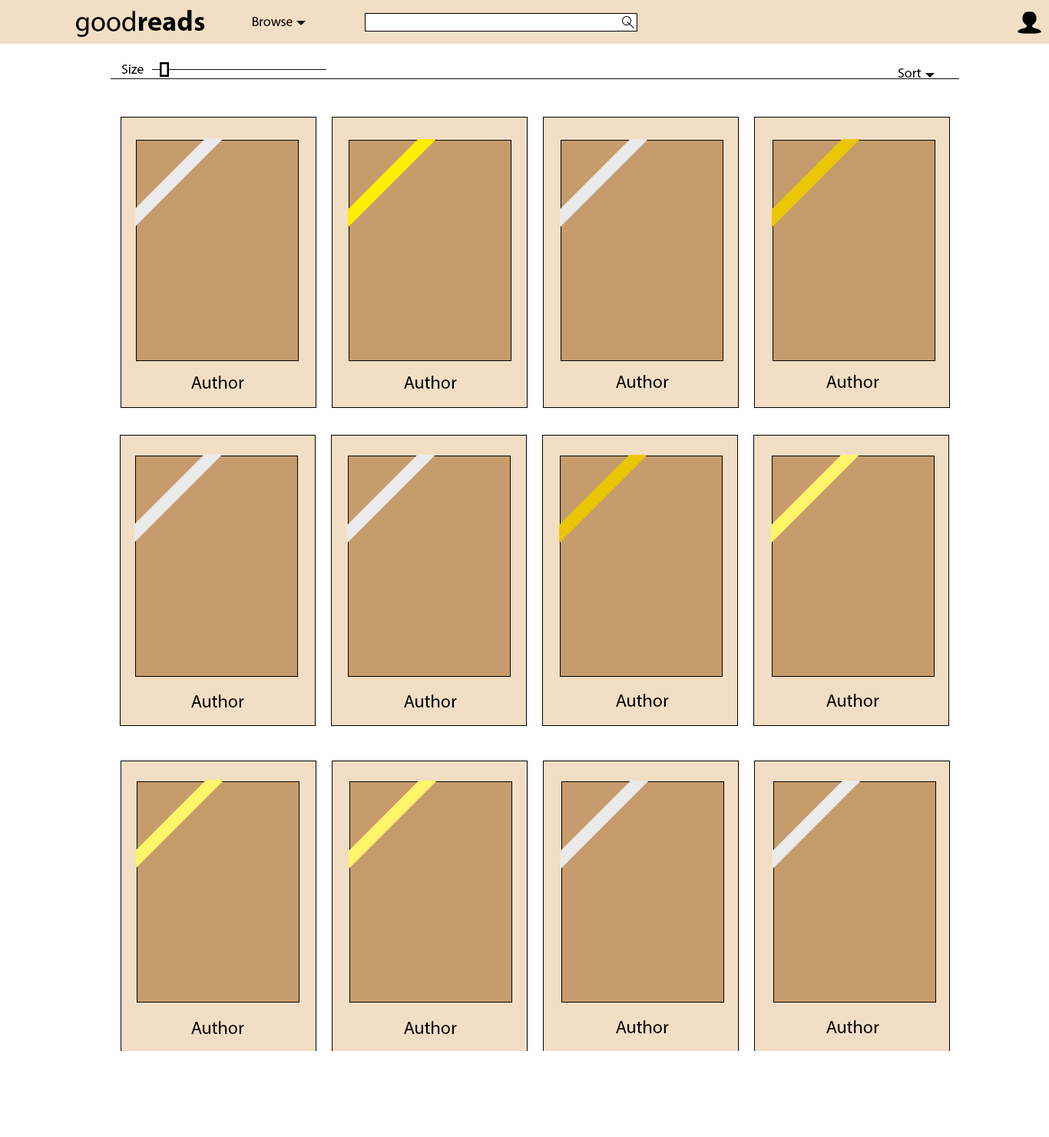
<style>
.page{position:relative;width:1049px;height:1137px;background:#ffffff}
.page>*{position:absolute;margin:0}
.t1{font:28.2px "MyriadPro-Bold";color:#000000}
.t2{font:13.6px "MyriadPro-Regular";color:#000000}
.t3{font:18.3px "MyriadPro-Regular";color:#000000}
</style>
<div class="page">
<p class="t1" style="left:138px;top:10px;width:67px;height:21px">reads</p>
<p class="t2" style="left:253px;top:17px;width:40px;height:9px">Browse</p>
<p class="t2" style="left:121px;top:65px;width:23px;height:9px">Size</p>
<p class="t2" style="left:898px;top:68px;width:24px;height:10px">Sort</p>
<p class="t3" style="left:191px;top:376px;width:53px;height:13px">Author</p>
<p class="t3" style="left:404px;top:376px;width:53px;height:13px">Author</p>
<p class="t3" style="left:616px;top:375px;width:53px;height:13px">Author</p>
<p class="t3" style="left:826px;top:375px;width:53px;height:13px">Author</p>
<p class="t3" style="left:191px;top:694px;width:53px;height:13px">Author</p>
<p class="t3" style="left:404px;top:694px;width:53px;height:13px">Author</p>
<p class="t3" style="left:616px;top:694px;width:53px;height:13px">Author</p>
<p class="t3" style="left:826px;top:694px;width:53px;height:13px">Author</p>
<p class="t3" style="left:191px;top:1021px;width:53px;height:13px">Author</p>
<p class="t3" style="left:404px;top:1021px;width:53px;height:13px">Author</p>
<p class="t3" style="left:616px;top:1020px;width:53px;height:13px">Author</p>
<p class="t3" style="left:826px;top:1020px;width:53px;height:13px">Author</p>
</div>
